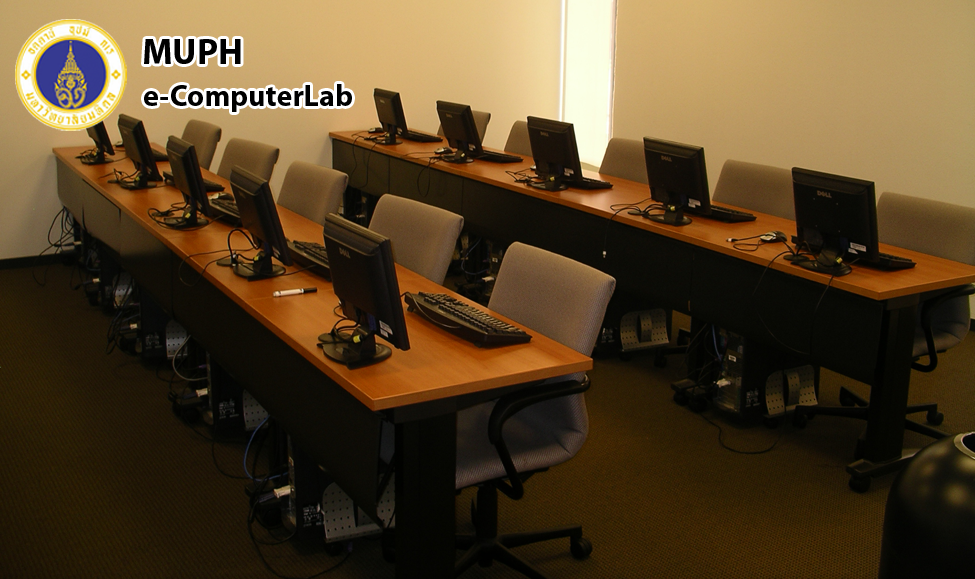
<style>
.page{position:relative;width:975px;height:579px}
.page>*{position:absolute;margin:0}
.t1{font:36px "MyriadPro-Bold";color:#000000}
.t2{font:30px "MyriadPro-Bold";color:#000000}
</style>
<div class="page">
<p class="t1" style="left:144px;top:39px;width:97px;height:25px">MUPH</p>
<p class="t2" style="left:144px;top:84px;width:208px;height:28px">e-ComputerLab</p>
</div>
